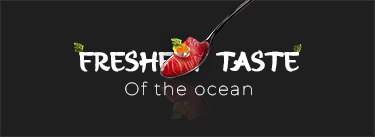
<style>
.page{position:relative;width:375px;height:137px;background:#1f1f1f}
.page>*{position:absolute;margin:0}
.t1{font:27.4px "SVN-HiroMisake-Regular";color:#ffffff;font-weight:bold}
.t2{font:17.6px "Montserrat-Thin";letter-spacing:0.1em;color:#ffffff;font-weight:bold}
</style>
<div class="page">
<p class="t1" style="left:79px;top:50px;width:220px;height:23px">Freshest Taste</p>
<p class="t2" style="left:125px;top:81px;width:127px;height:15px">Of the ocean</p>
</div>
